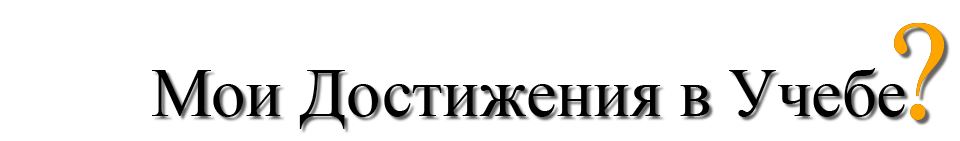
<style>
.page{position:relative;width:960px;height:141px;background:#ffffff}
.page>*{position:absolute;margin:0}
.t1{font:138.6px "TimesNewRomanPSMT";color:#ffa500}
.t2{font:69px "TimesNewRomanPSMT";color:#000000}
</style>
<div class="page">
<p class="t1" style="left:894px;top:23px;width:51px;height:97px">?</p>
<p class="t1" style="left:894px;top:23px;width:51px;height:97px">?</p>
<p class="t2" style="left:152px;top:68px;width:753px;height:61px">Мои Достижения в Учебе</p>
</div>
